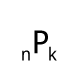
<style>
.page{position:relative;width:80px;height:80px;background:#ffffff}
.page>*{position:absolute;margin:0}
.t1{font:31.8px "DroidSans";color:#000000}
.t2{font:18px "DroidSans";color:#000000}
</style>
<div class="page">
<p class="t1" style="left:34px;top:30px;width:14px;height:24px">P</p>
<p class="t2" style="left:22px;top:50px;width:8px;height:11px">n</p>
<p class="t2" style="left:49px;top:46px;width:8px;height:15px">k</p>
</div>
